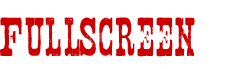
<style>
.page{position:relative;width:227px;height:69px;background:#ffffff}
.page>*{position:absolute;margin:0}
.t1{font:48px "Nashville";color:#cc0000}
</style>
<div class="page">
<p class="t1" style="left:0px;top:17px;width:195px;height:40px">FullScreen</p>
</div>
